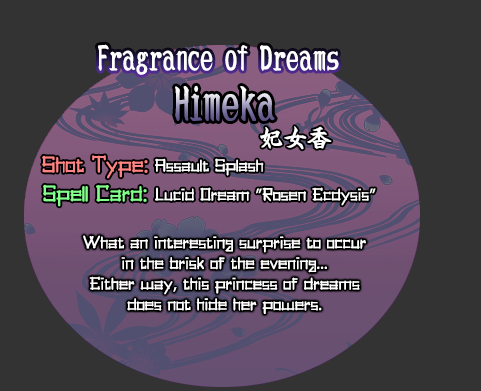
<style>
.page{position:relative;width:481px;height:391px;background:#333333}
.page>*{position:absolute;margin:0}
.t1{font:34.7px "DCLeiKaiSho-W5-WING-RKSJ-H";color:#ffffff}
.t2{font:48px "DCLeiKaiSho-W5-WING-RKSJ-H"}
.t3{font:24px "DCLeiKaiSho-W5-WING-RKSJ-H";color:#ffffff}
.t4{font:24px "PickupStixRegular";color:#ff8383}
.t5{font:18.7px "PickupStixRegular";color:#ffffff}
.t6{font:24px "PickupStixRegular";color:#83ff8c}
</style>
<div class="page">
<p class="t1" style="left:98px;top:44px;width:241px;height:31px">Fragrance of Dreams</p>
<p class="t2" style="left:175px;top:85px;width:100px;height:36px">Himeka</p>
<p class="t3" style="left:260px;top:126px;width:72px;height:24px">妃女香</p>
<p class="t4" style="left:42px;top:155px;width:106px;height:24px">Shot Type:</p>
<p class="t5" style="left:155px;top:158px;width:109px;height:18px">Assault Splash</p>
<p class="t6" style="left:43px;top:184px;width:104px;height:23px">Spell Card:</p>
<p class="t5" style="left:155px;top:187px;width:221px;height:19px">Lucid Dream "Rosen Ecdysis"</p>
<p class="t5" style="left:83px;top:235px;width:283px;height:79px;text-align:center">What an interesting surprise to occur<br>in the brisk of the evening...<br>Either way, this princess of dreams<br>does not hide her powers.</p>
</div>
